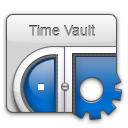
<style>
.page{position:relative;width:128px;height:128px;background:#ffffff}
.page>*{position:absolute;margin:0}
.t1{font:14px "ArialMT";color:#9e9fa2}
</style>
<div class="page">
<p class="t1" style="left:29px;top:25px;width:66px;height:11px">Time Vault</p>
</div>
